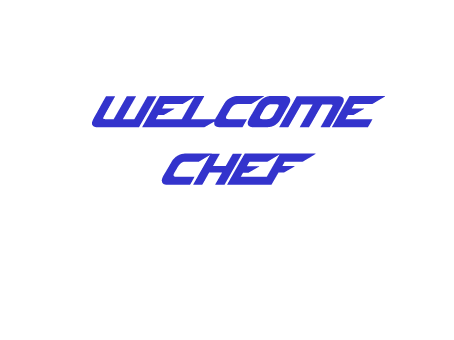
<style>
.page{position:relative;width:454px;height:340px;background:#ffffff}
.page>*{position:absolute;margin:0}
.t1{font:48px "NFSfont";color:#3333cc}
</style>
<div class="page">
<p class="t1" style="left:92px;top:96px;width:293px;height:89px;text-align:center">Welcome Chef</p>
</div>
